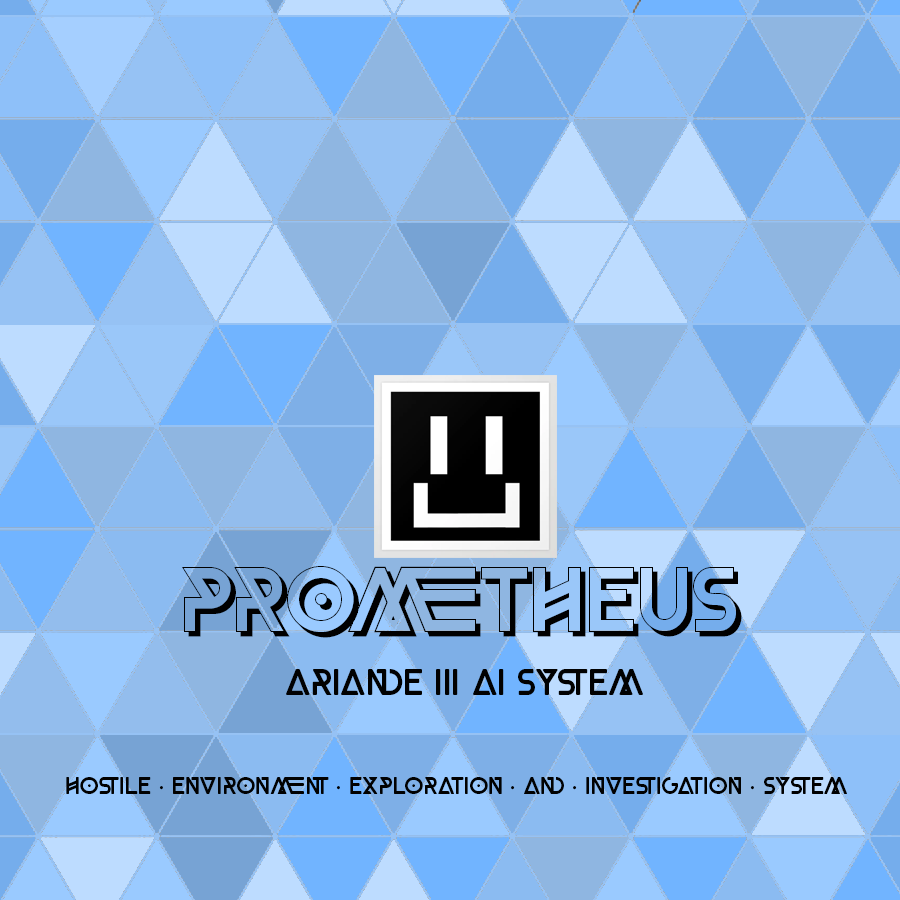
<style>
.page{position:relative;width:900px;height:900px}
.page>*{position:absolute;margin:0}
.t1{font:90px "RobloxBlackShadow";color:#000000}
.t2{font:36px "RobloxBlackRound";color:#010101}
.t3{font:24px "RobloxBlackRound";color:#010101}
.t4{font:24px "MyriadPro-Regular";color:#010101}
</style>
<div class="page">
<p class="t1" style="left:182px;top:566px;width:560px;height:72px">prometheus</p>
<p class="t2" style="left:286px;top:669px;width:357px;height:26px">ARIANDE III AI SYSTEM</p>
<p class="t3" style="left:66px;top:777px;width:781px;height:17px">Hostile <span class="t4">·</span> Environment <span class="t4">·</span> Exploration <span class="t4">·</span> and <span class="t4">·</span> Investigation <span class="t4">·</span> System</p>
</div>
